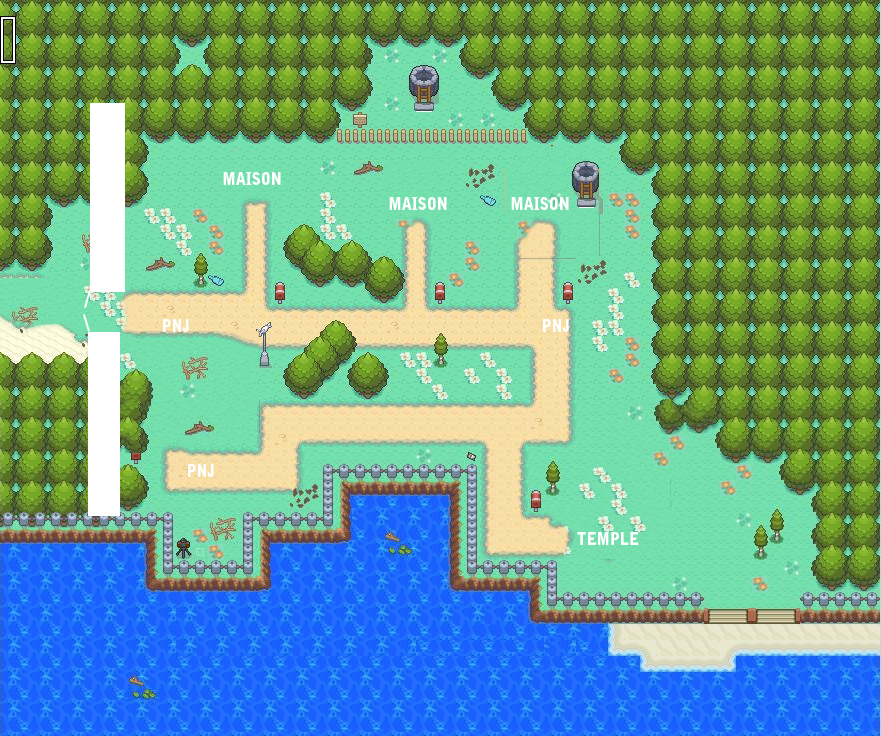
<style>
.page{position:relative;width:881px;height:736px}
.page>*{position:absolute;margin:0}
.t1{font:16.8px "BellGothic-Black";color:#ffffff;scale:0.9 1}
.t2{font:12.6px "BellGothic-Black";color:#ffffff;scale:0.9 1}
</style>
<div class="page">
<p class="t1" style="left:223px;top:172px;width:58px;height:13px">MAISON</p>
<p class="t1" style="left:389px;top:197px;width:58px;height:13px">MAISON</p>
<p class="t1" style="left:511px;top:197px;width:58px;height:13px">MAISON</p>
<p class="t2" style="left:163px;top:319px;width:26px;height:13px">PNJ</p>
<p class="t2" style="left:543px;top:319px;width:26px;height:13px">PNJ</p>
<p class="t2" style="left:188px;top:464px;width:26px;height:13px">PNJ</p>
<p class="t2" style="left:577px;top:532px;width:62px;height:13px">TEMPLE</p>
</div>
